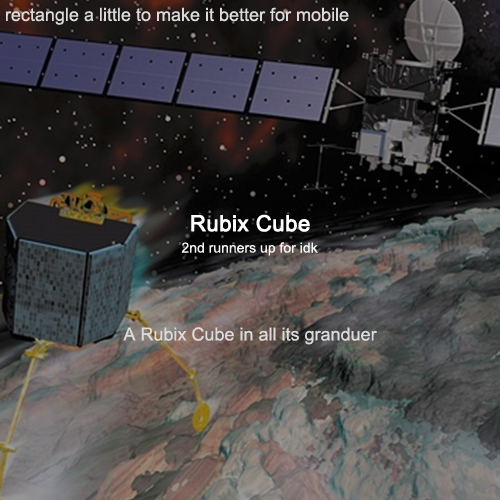
<style>
.page{position:relative;width:500px;height:500px}
.page>*{position:absolute;margin:0}
.t1{font:18px "ArialMT";color:#dcdbdc}
.t2{font:22px "ArialMT";color:#ffffff;font-weight:bold}
.t3{font:14px "ArialMT";color:#f5f5f5}
</style>
<div class="page">
<p class="t1" style="left:6px;top:7px;width:343px;height:18px">rectangle a little to make it better for mobile</p>
<p class="t2" style="left:191px;top:214px;width:119px;height:18px">Rubix Cube</p>
<p class="t3" style="left:181px;top:242px;width:137px;height:14px">2nd runners up for idk</p>
<p class="t1" style="left:123px;top:327px;width:254px;height:18px">A Rubix Cube in all its granduer</p>
</div>
